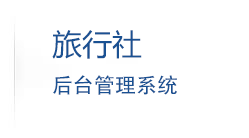
<style>
.page{position:relative;width:249px;height:138px;background:#ffffff}
.page>*{position:absolute;margin:0}
.t1{font:21px/19px "AdobeHeitiStd-Regular";color:#1a5192}
.t2{font:30px/19px "MicrosoftYaHei";color:#1a5192}
</style>
<div class="page">
<p class="t1" style="left:52px;top:30px;width:125px;height:65px;text-align:justify"><span class="t2">旅行社<br></span><br>后台管理系统</p>
</div>
